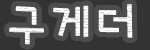
<style>
.page{position:relative;width:150px;height:50px;background:#333333}
.page>*{position:absolute;margin:0}
.t1{font:48px "Goyang";letter-spacing:0.1em;color:#ffffff;font-weight:bold}
</style>
<div class="page">
<p class="t1" style="left:9px;top:4px;width:124px;height:41px">구게더</p>
</div>
